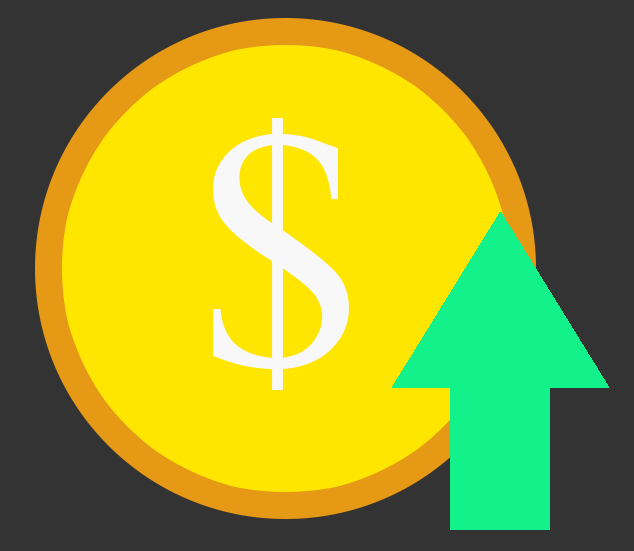
<style>
.page{position:relative;width:634px;height:551px;background:#333333}
.page>*{position:absolute;margin:0}
.t1{font:341.7px "TimesNewRomanPSMT";color:#f8f8f8}
</style>
<div class="page">
<p class="t1" style="left:213px;top:118px;width:136px;height:272px">$</p>
</div>
